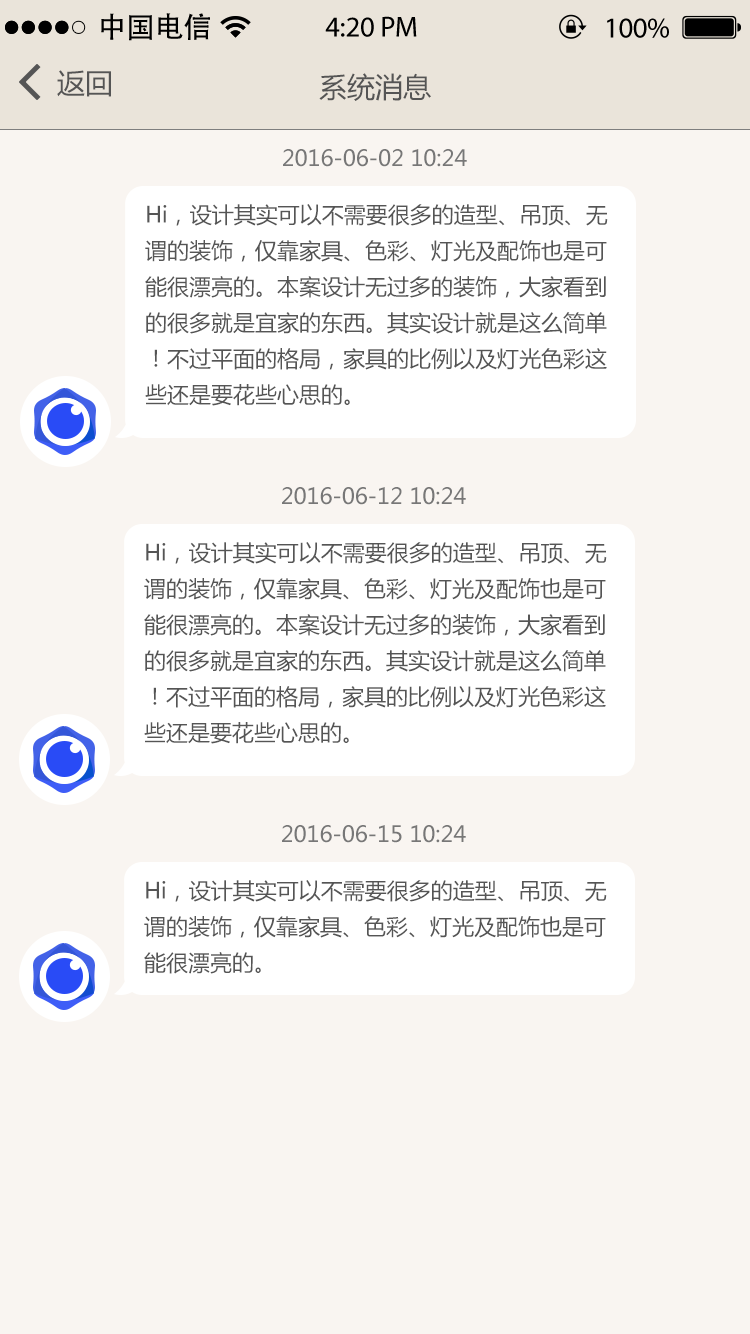
<style>
.page{position:relative;width:750px;height:1334px;background:#f9f5f1}
.page>*{position:absolute;margin:0}
.t1{font:28.8px "AdobeHeitiStd-Regular";color:#000000}
.t2{font:28.8px "MyriadPro-Regular";color:#000000}
.t3{font:28px "MicrosoftYaHei";color:#555555}
.t4{font:22px "MicrosoftYaHei";color:#777777}
.t5{font:22px/36px "MicrosoftYaHei";color:#555555}
</style>
<div class="page">
<p class="t1" style="left:101px;top:13px;width:109px;height:28px">中国电信</p>
<p class="t2" style="left:325px;top:16px;width:92px;height:21px">4:20 PM</p>
<p class="t2" style="left:607px;top:18px;width:62px;height:20px">100%</p>
<p class="t3" style="left:57px;top:70px;width:54px;height:27px">返回</p>
<p class="t3" style="left:319px;top:73px;width:112px;height:28px">系统消息</p>
<p class="t4" style="left:283px;top:149px;width:184px;height:18px">2016-06-02 10:24</p>
<p class="t5" style="left:145px;top:204px;width:463px;height:202px">Hi，设计其实可以不需要很多的造型、吊顶、无谓的装饰，仅靠家具、色彩、灯光及配饰也是可能很漂亮的。本案设计无过多的装饰，大家看到的很多就是宜家的东西。其实设计就是这么简单！不过平面的格局，家具的比例以及灯光色彩这些还是要花些心思的。</p>
<p class="t4" style="left:282px;top:487px;width:184px;height:18px">2016-06-12 10:24</p>
<p class="t5" style="left:144px;top:542px;width:463px;height:202px">Hi，设计其实可以不需要很多的造型、吊顶、无谓的装饰，仅靠家具、色彩、灯光及配饰也是可能很漂亮的。本案设计无过多的装饰，大家看到的很多就是宜家的东西。其实设计就是这么简单！不过平面的格局，家具的比例以及灯光色彩这些还是要花些心思的。</p>
<p class="t4" style="left:282px;top:825px;width:184px;height:18px">2016-06-15 10:24</p>
<p class="t5" style="left:144px;top:880px;width:463px;height:94px">Hi，设计其实可以不需要很多的造型、吊顶、无谓的装饰，仅靠家具、色彩、灯光及配饰也是可能很漂亮的。</p>
</div>
